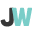
<style>
.page{position:relative;width:32px;height:32px;background:#ffffff}
.page>*{position:absolute;margin:0}
.t1{font:26px "Cubano-Regular";letter-spacing:-0.12em;color:#363636}
.t2{font:26px "Cubano-Regular";letter-spacing:-0.12em;color:#7acdc8}
</style>
<div class="page">
<p class="t1" style="left:0px;top:7px;width:33px;height:20px">J<span class="t2">W</span></p>
</div>
